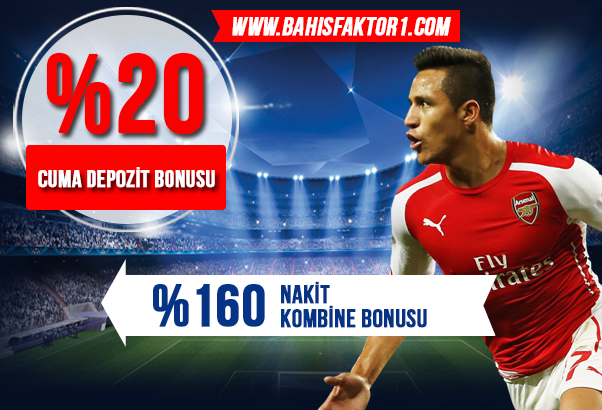
<style>
.page{position:relative;width:602px;height:410px}
.page>*{position:absolute;margin:0}
.t1{font:26px "BebasNeue";color:#ffffff;font-weight:bold;font-style:italic}
.t2{font:110px "BebasNeue";color:#fa0101;font-weight:bold}
.t3{font:24px "BebasNeue";color:#ffffff;font-weight:bold}
.t4{font:26px/12px "BebasNeue";color:#053487;font-weight:bold}
.t5{font:60px "BebasNeue";color:#053487;font-weight:bold}
</style>
<div class="page">
<p class="t1" style="left:232px;top:17px;width:219px;height:19px">WWW.BAHISFAKTOR1.COM</p>
<p class="t2" style="left:46px;top:52px;width:158px;height:83px">%20</p>
<p class="t3" style="left:38px;top:167px;width:177px;height:21px">CUMA depozİT BONUSU</p>
<p class="t4" style="left:281px;top:281px;width:146px;height:47px">NAKİT<br>KOMBİNE BONUSU</p>
<p class="t5" style="left:153px;top:284px;width:112px;height:43px">%160</p>
</div>
